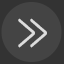
<style>
.page{position:relative;width:64px;height:64px;background:#444444}
.page>*{position:absolute;margin:0}
.t1{font:50px "GulimChe";letter-spacing:-0.15em;color:#dddddd;scale:0.7 1}
</style>
<div class="page">
<p class="t1" style="left:18px;top:18px;width:29px;height:30px">&gt;&gt;</p>
</div>
